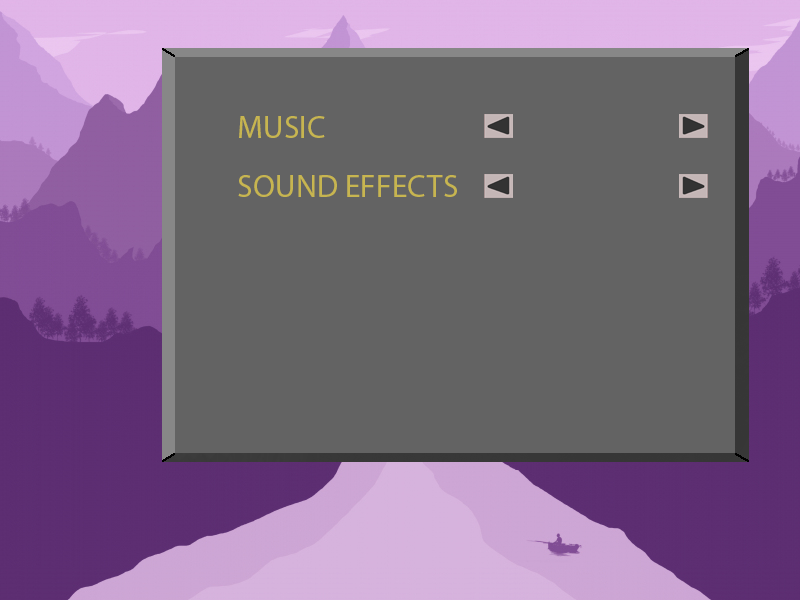
<style>
.page{position:relative;width:800px;height:600px;background:#636363}
.page>*{position:absolute;margin:0}
.t1{font:32px "MyriadPro-Regular";color:#c7b550}
</style>
<div class="page">
<p class="t1" style="left:239px;top:116px;width:86px;height:22px">MUSIC</p>
<p class="t1" style="left:238px;top:175px;width:219px;height:22px">SOUND EFFECTS</p>
</div>
